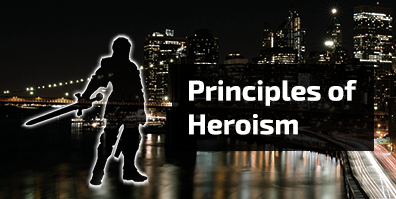
<style>
.page{position:relative;width:396px;height:199px}
.page>*{position:absolute;margin:0}
.t1{font:28px "Exo2-Bold";color:#ffffff}
</style>
<div class="page">
<p class="t1" style="left:189px;top:80px;width:168px;height:55px">Principles of<br>Heroism</p>
</div>
